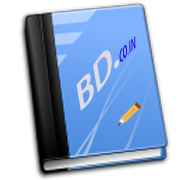
<style>
.page{position:relative;width:180px;height:180px;background:#ffffff}
.page>*{position:absolute;margin:0}
.t1{font:13.2px "MyriadPro-CondIt";color:#3512e7;font-variant:small-caps;font-style:italic}
.t2{font:37.8px "MyriadPro-Semibold";color:#dddaea;font-variant:small-caps;font-style:italic}
</style>
<div class="page">
<p class="t1" style="left:76px;top:36px;width:60px;height:75px;rotate:-19deg"><span class="t2">BD.</span>CO.IN</p>
</div>
